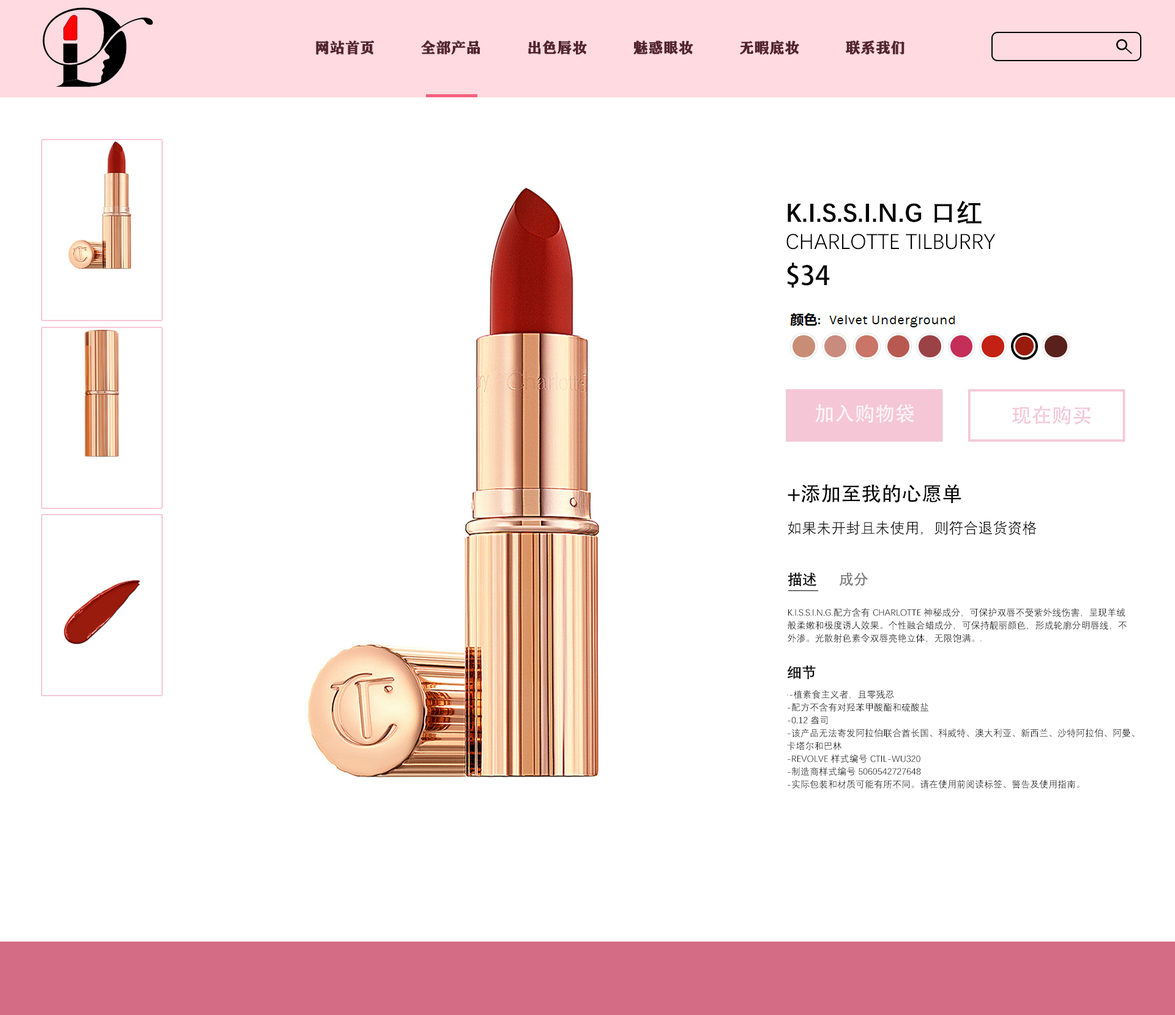
<style>
.page{position:relative;width:1175px;height:1015px;background:#ffffff}
.page>*{position:absolute;margin:0}
.t1{font:14.7px "FZCHSJW--GB1-0";color:#532530;text-transform:uppercase;font-weight:bold}
.t2{font:21.6px/31.2px "DengXian";color:#040404;text-transform:uppercase}
.t3{font:26.4px/31.2px "DengXian-Bold";color:#040404;text-transform:uppercase}
.t4{font:26.4px/38.4px "AdobeHeitiStd-Regular";color:#040404;text-transform:uppercase}
.t5{font:20.2px "AdobeHeitiStd-Regular";color:#fbf6f7;text-transform:uppercase}
.t6{font:20.2px "AdobeHeitiStd-Regular";color:#f5c7d6;text-transform:uppercase}
.t7{font:20.2px "AdobeHeitiStd-Regular";color:#060606;text-transform:uppercase}
.t8{font:14.7px "DengXian";color:#060606;text-transform:uppercase}
.t9{font:14.7px "DengXian-Bold";color:#060606;text-transform:uppercase}
.t10{font:14.7px "DengXian-Bold";color:#7c7c7c;text-transform:uppercase}
.t11{font:9.2px/12.8px "DengXian";color:#060606;text-transform:uppercase}
.t12{font:9.2px/31.2px "DengXian";color:#060606;text-transform:uppercase}
</style>
<div class="page">
<p class="t1" style="left:316px;top:40px;width:588px;height:15px">网站首页          全部产品          出色唇妆          魅惑眼妆          无暇底妆          联系我们</p>
<p class="t2" style="left:786px;top:201px;width:209px;height:87px"><span class="t3">K.I.S.S.I.N.G 口红<br></span>charlotte tilburry<br><span class="t4">$34</span></p>
<p class="t5" style="left:815px;top:404px;width:98px;height:19px">加入购物袋</p>
<p class="t6" style="left:1012px;top:406px;width:78px;height:19px">现在购买</p>
<p class="t7" style="left:787px;top:484px;width:174px;height:20px">+添加至我的心愿单</p>
<p class="t8" style="left:787px;top:521px;width:249px;height:14px">如果未开封且未使用，则符合退货资格</p>
<p class="t9" style="left:787px;top:572px;width:30px;height:14px">描述</p>
<p class="t10" style="left:839px;top:572px;width:29px;height:14px">成分</p>
<p class="t11" style="left:787px;top:608px;width:339px;height:35px">K.I.S.S.I.N.G.配方含有 Charlotte 神秘成分，可保护双唇不受紫外线伤害，呈现羊绒<br>般柔嫩和极度诱人效果。个性融合蜡成分，可保持靓丽颜色，形成轮廓分明唇线，不<br>外渗。光散射色素令双唇亮艳立体，无限饱满。<span class="t12">.</span></p>
<p class="t9" style="left:787px;top:665px;width:29px;height:14px">细节</p>
<p class="t11" style="left:787px;top:690px;width:347px;height:99px">·-植素食主义者，且零残忍<br>-配方不含有对羟苯甲酸酯和硫酸盐<br>-0.12 盎司<br>-该产品无法寄发阿拉伯联合酋长国、科威特、澳大利亚、新西兰、沙特阿拉伯、阿曼、<br>卡塔尔和巴林<br>-Revolve 样式编号 CTIL-WU320<br>-制造商样式编号 5060542727648<br>-实际包装和材质可能有所不同。请在使用前阅读标签、警告及使用指南。</p>
</div>
